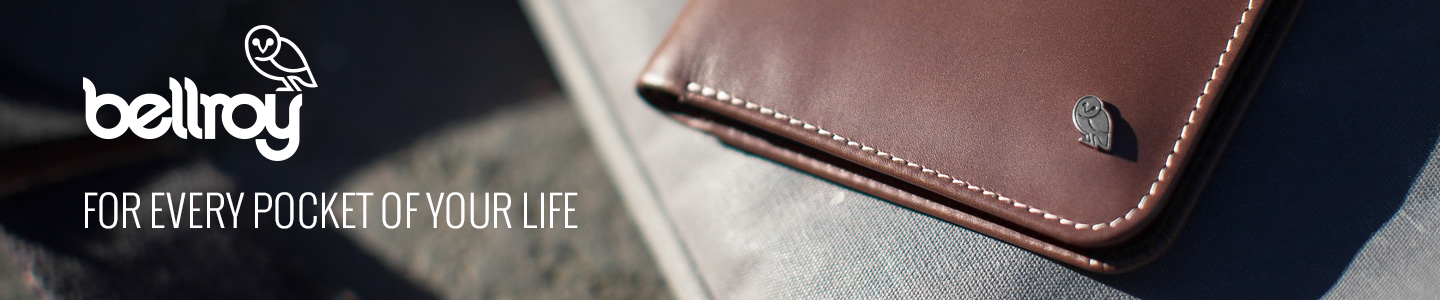
<style>
.page{position:relative;width:1440px;height:300px}
.page>*{position:absolute;margin:0}
.t1{font:42px "Oswald-Light";letter-spacing:0.01em;color:#ffffff}
</style>
<div class="page">
<p class="t1" style="left:85px;top:192px;width:493px;height:37px">FOR EVERY POCKET OF YOUR LIFE</p>
</div>
